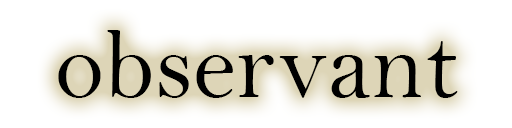
<style>
.page{position:relative;width:512px;height:128px;background:#ffffff}
.page>*{position:absolute;margin:0}
.t1{font:100px "BellMT";color:#000000}
</style>
<div class="page">
<p class="t1" style="left:58px;top:30px;width:400px;height:68px">observant</p>
</div>
